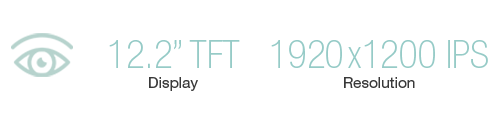
<style>
.page{position:relative;width:500px;height:120px;background:#ffffff}
.page>*{position:absolute;margin:0}
.t1{font:38.9px/19.4px "HelveticaNeue-ThinCond";color:#96cbc7}
.t2{font:15.3px/19.4px "HelveticaNeue-Roman";color:#393939}
.t3{font:38.9px/19.4px "HelveticaNeue-ThinCond";letter-spacing:0.1em;color:#96cbc7}
</style>
<div class="page">
<p class="t1" style="left:109px;top:40px;width:131px;height:51px;text-align:center">12.2” TFT<br><span class="t2">Display</span></p>
<p class="t2" style="left:271px;top:40px;width:217px;height:48px;text-align:center"><span class="t1">192</span><span class="t3">0</span><span class="t1">x1200 IPS<br></span>Resolution</p>
</div>
